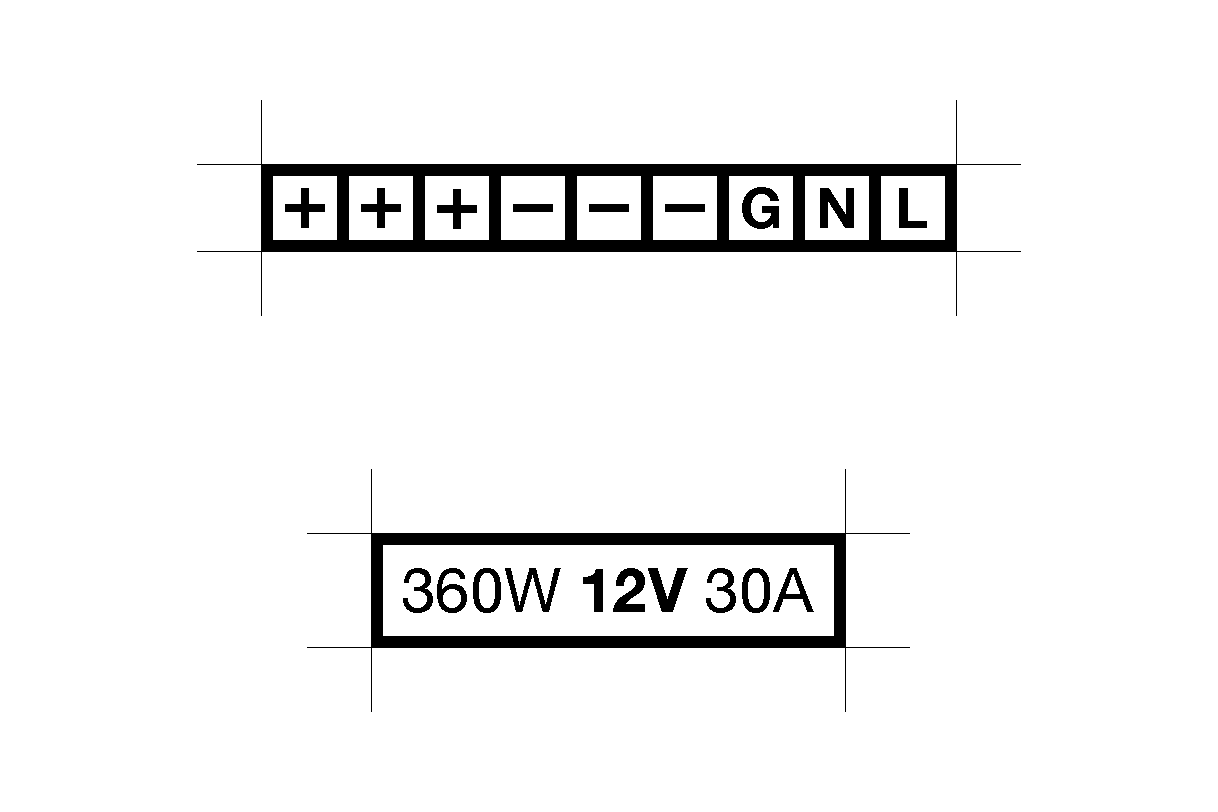
<style>
.page{position:relative;width:1218px;height:812px;background:#ffffff}
.page>*{position:absolute;margin:0}
.t1{font:56.4px "HelveticaNeue-Bold";color:#000000}
.t2{font:62px "HelveticaNeue";color:#000000}
.t3{font:62px "HelveticaNeue-Bold";color:#000000}
</style>
<div class="page">
<p class="t1" style="left:742px;top:187px;width:37px;height:42px">G</p>
<p class="t1" style="left:820px;top:188px;width:34px;height:40px">N</p>
<p class="t1" style="left:899px;top:188px;width:28px;height:40px">L</p>
<p class="t2" style="left:403px;top:568px;width:411px;height:45px">360W <span class="t3">12V</span> 30A</p>
</div>
